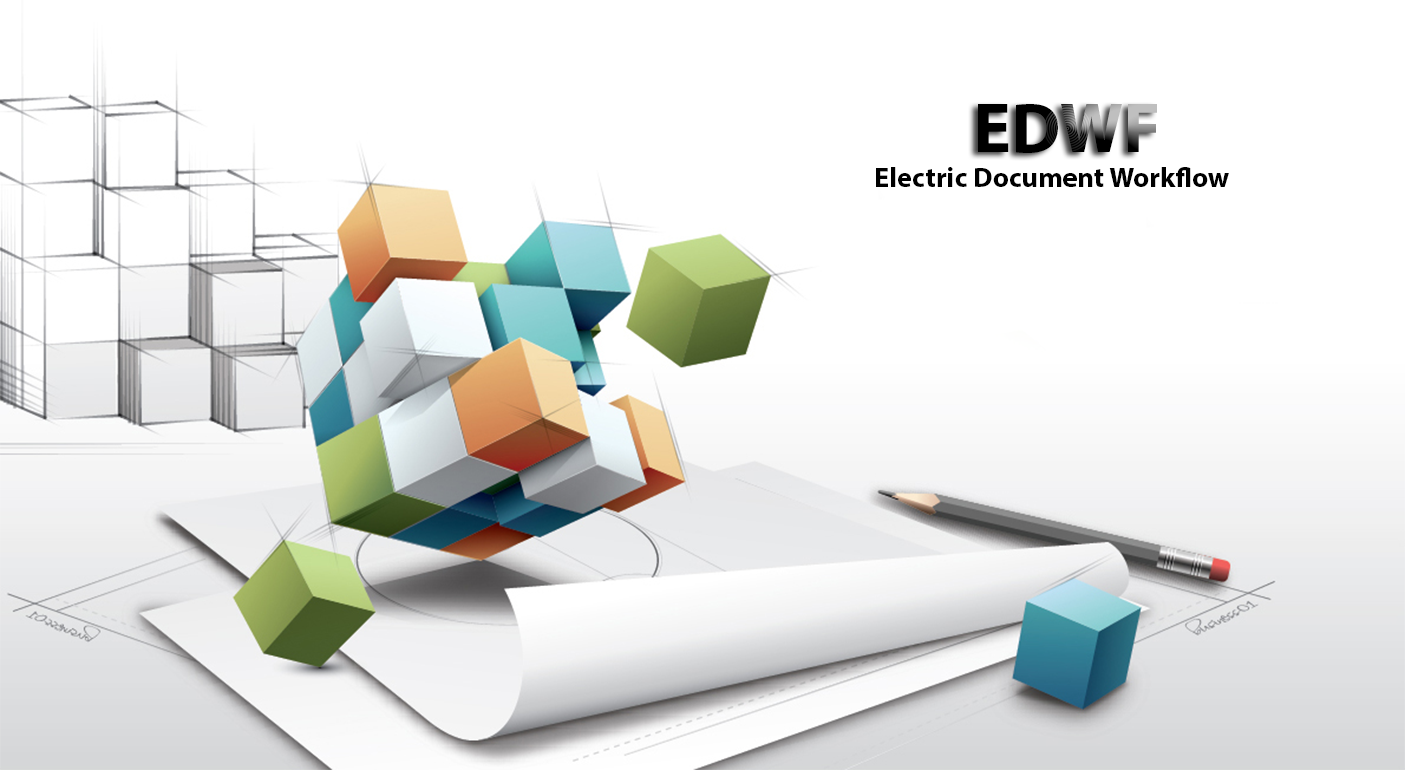
<style>
.page{position:relative;width:1405px;height:770px;background:#ffffff}
.page>*{position:absolute;margin:0}
.t1{font:70.8px "MyriadPro-Bold"}
.t2{font:28.3px "MyriadPro-Bold";color:#000000}
</style>
<div class="page">
<p class="t1" style="left:978px;top:104px;width:179px;height:49px">EDWF</p>
<p class="t2" style="left:876px;top:167px;width:353px;height:20px">Electric Document Workflow</p>
</div>
